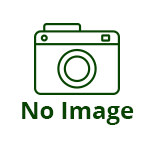
<style>
.page{position:relative;width:150px;height:150px;background:#ffffff}
.page>*{position:absolute;margin:0}
.t1{font:24px "OpenSans-Bold";color:#084401}
</style>
<div class="page">
<p class="t1" style="left:22px;top:102px;width:112px;height:23px">No Image</p>
</div>
